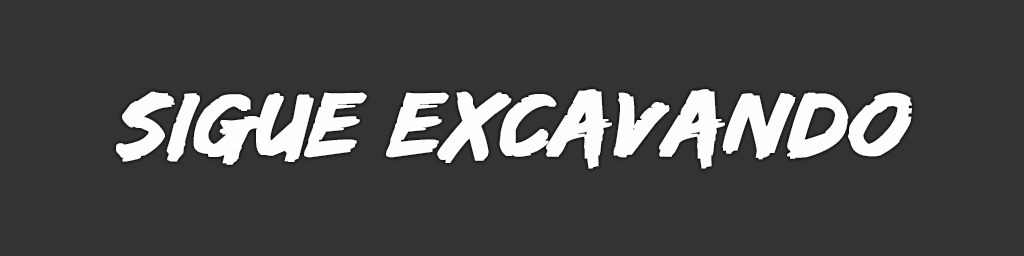
<style>
.page{position:relative;width:1024px;height:256px;background:#333333}
.page>*{position:absolute;margin:0}
.t1{font:94px "EdoSZ";color:#fefefe;font-weight:bold;font-style:italic;scale:1.04 1}
</style>
<div class="page">
<p class="t1" style="left:116px;top:89px;width:796px;height:80px">Sigue excavando</p>
</div>
